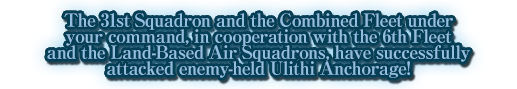
<style>
.page{position:relative;width:517px;height:89px;background:#053f55}
.page>*{position:absolute;margin:0}
.t1{font:18px/16px "RyuminPro-ExBold";letter-spacing:-0.04em;color:#93bee0}
</style>
<div class="page">
<p class="t1" style="left:47px;top:13px;width:423px;height:65px;text-align:center">The 31st Squadron and the Combined Fleet under<br>your command, in cooperation with the 6th Fleet<br>and the Land-Based Air Squadrons, have successfully<br>attacked enemy-held Ulithi Anchorage!</p>
</div>
